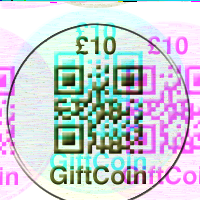
<style>
.page{position:relative;width:200px;height:200px}
.page>*{position:absolute;margin:0}
.t1{font:25px "Helvetica-Bold"}
</style>
<div class="page">
<p class="t1" style="left:75px;top:21px;width:41px;height:19px">£10</p>
<p class="t1" style="left:50px;top:150px;width:96px;height:20px">GiftCoin</p>
</div>
